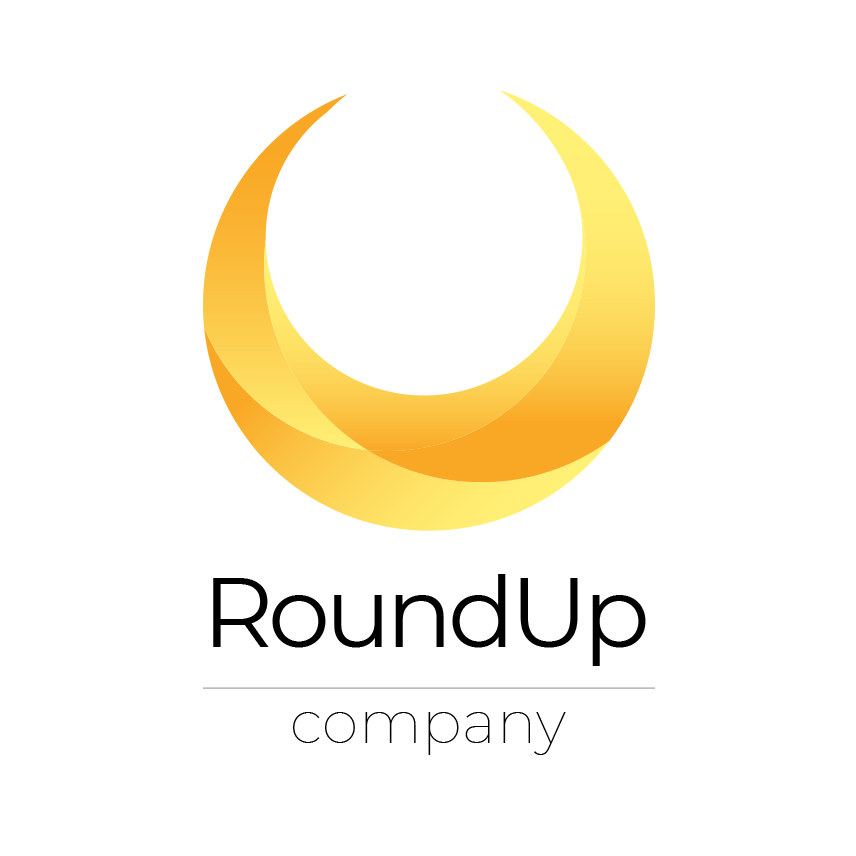
<style>
.page{position:relative;width:856px;height:856px;background:#ffffff}
.page>*{position:absolute;margin:0}
.t1{font:98.8px "Montserrat-Regular";letter-spacing:-0.052em;color:#000000}
.t2{font:58.9px "Montserrat-Thin";letter-spacing:0.01em;color:#000000}
</style>
<div class="page">
<p class="t1" style="left:213px;top:574px;width:433px;height:92px">RoundUp</p>
<p class="t2" style="left:293px;top:712px;width:273px;height:43px">company</p>
</div>
